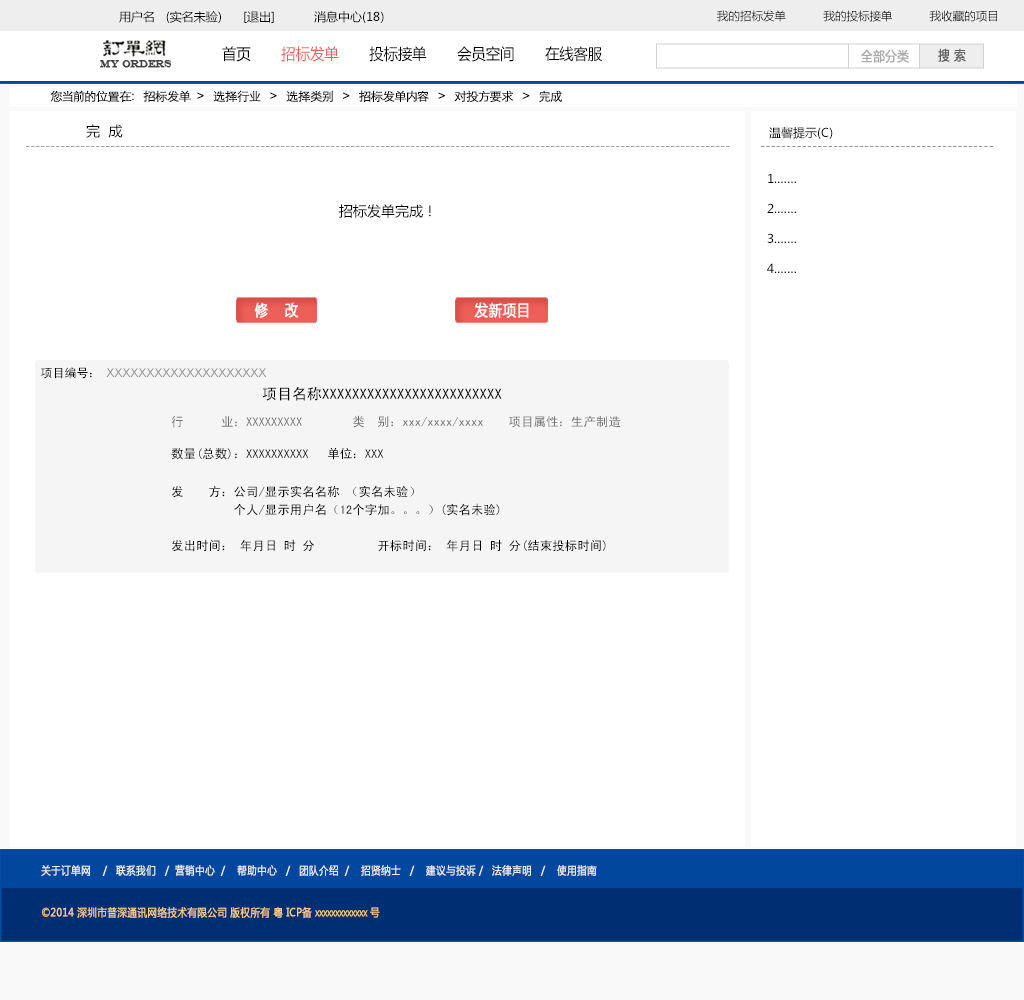
<style>
.page{position:relative;width:1024px;height:1000px;background:#ffffff}
.page>*{position:absolute;margin:0}
.t1{font:12px "MicrosoftYaHei";color:#000000}
.t2{font:11.5px "MicrosoftYaHei";color:#000000}
.t3{font:15.4px "MicrosoftYaHei";color:#000000;font-variant:small-caps;scale:0.94 1}
.t4{font:15.4px "MicrosoftYaHei";color:#ed6059;font-variant:small-caps;scale:0.94 1}
.t5{font:13.2px "MicrosoftYaHei";color:#aaaaaa;font-variant:small-caps;font-weight:bold;scale:0.86 1}
.t6{font:13.2px "MicrosoftYaHei";color:#626262;font-variant:small-caps;font-weight:bold;scale:0.86 1}
.t7{font:9.9px "EngraversMT";color:#434343;font-variant:small-caps;font-weight:bold;scale:0.86 1}
.t8{font:12px "STXihei";color:#060606;scale:1.04 1}
.t9{font:14px "MicrosoftYaHei";color:#000000}
.t10{font:12px "MicrosoftYaHei";color:#a0a0a0}
.t11{font:12px "MicrosoftYaHei";color:#959595}
.t12{font:12px/30px "MicrosoftYaHei";color:#000000}
.t13{font:15.4px "MicrosoftYaHei";color:#ffffff;font-variant:small-caps;font-weight:bold;scale:0.86 1}
.t14{font:12px "ArialMT";color:#898989}
.t15{font:15px "SimHei";color:#000000}
.t16{font:12px "SimHei";color:#000000}
.t17{font:12.5px "SimHei";color:#000000}
.t18{font:12.5px "SimHei";color:#707070}
.t19{font:12.5px/18px "SimHei";color:#000000}
.t20{font:11px "MicrosoftYaHei";color:#eeeeee;font-variant:small-caps;font-weight:bold;scale:0.86 1}
.t21{font:15.4px "STXihei";color:#eeeeee;font-variant:small-caps;font-weight:bold;scale:0.86 1}
.t22{font:11px "MicrosoftYaHei";color:#facd89;font-variant:small-caps;font-weight:bold;scale:0.87 1}
.t23{font:11px "MicrosoftYaHei";color:#eeeeee;font-variant:small-caps;font-weight:bold;scale:0.87 1}
</style>
<div class="page">
<p class="t1" style="left:119px;top:11px;width:265px;height:12px">用户名   (实名未验)      [退出]           消息中心(18)</p>
<p class="t2" style="left:717px;top:10px;width:280px;height:12px">我的招标发单           我的投标接单           我收藏的项目</p>
<p class="t3" style="left:222px;top:46px;width:381px;height:16px">首页       <span class="t4">招标发单  </span>     投标接单       会员空间       在线客服</p>
<p class="t5" style="left:861px;top:49px;width:48px;height:14px">全部分类</p>
<p class="t6" style="left:938px;top:48px;width:28px;height:14px">搜 索</p>
<p class="t7" style="left:100px;top:60px;width:72px;height:8px">MY ORDERS</p>
<p class="t8" style="left:50px;top:90px;width:512px;height:12px">您当前的位置在：  招标发单  &gt;   选择行业   &gt;   选择类别   &gt;   招标发单内容   &gt;   对投方要求   &gt;   完成</p>
<p class="t9" style="left:86px;top:124px;width:37px;height:14px">完  成</p>
<p class="t1" style="left:769px;top:127px;width:64px;height:12px">温馨提示(C)</p>
<p class="t10" style="left:26px;top:146px;width:704px;height:1px">---------------------------------------------------------------------------------------------------------------------------------------------</p>
<p class="t11" style="left:761px;top:146px;width:232px;height:1px">---------------------------------------------</p>
<p class="t12" style="left:767px;top:173px;width:29px;height:100px">1.……<br>2.……<br>3.……<br>4.……</p>
<p class="t9" style="left:339px;top:204px;width:92px;height:14px">招标发单完成！</p>
<p class="t13" style="left:254px;top:302px;width:45px;height:16px">修    改</p>
<p class="t13" style="left:474px;top:302px;width:55px;height:16px">发新项目</p>
<p class="t14" style="left:41px;top:367px;width:226px;height:12px"><span class="t15"> </span><span class="t16">项目编号： </span>XXXXXXXXXXXXXXXXXXXX</p>
<p class="t15" style="left:262px;top:386px;width:240px;height:15px"><span class="t17"><br></span>项目名称XXXXXXXXXXXXXXXXXXXXXXXX</p>
<p class="t18" style="left:171px;top:415px;width:450px;height:13px">行      业：XXXXXXXXX        类  别：xxx/xxxx/xxxx    项目属性：生产制造</p>
<p class="t17" style="left:171px;top:447px;width:213px;height:13px">数量(总数)：XXXXXXXXXX   单位：XXX</p>
<p class="t19" style="left:172px;top:485px;width:434px;height:67px">发    方：公司/显示实名名称 （实名未验）<br>          个人/显示用户名（12个字加。。。）(实名未验)<br><br>发出时间： 年月日 时 分          开标时间： 年月日 时 分(结束投标时间)</p>
<p class="t20" style="left:41px;top:864px;width:556px;height:12px"><span class="t21"><br><br></span>关于订单网    /   联系我们   /  营销中心  /    帮助中心   /   团队介绍  /    招贤纳士   /    建议与投诉 /   法律声明   /    使用指南</p>
<p class="t22" style="left:42px;top:907px;width:338px;height:11px"><span class="t23"> </span>©2014 深圳市普深通讯网络技术有限公司 版权所有 粤 ICP备 xxxxxxxxxxxxx 号</p>
</div>
